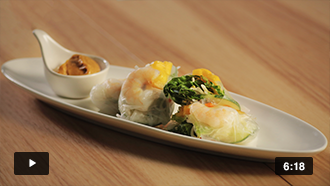
<style>
.page{position:relative;width:330px;height:186px}
.page>*{position:absolute;margin:0}
.t1{font:10.9px "Helvetica-Bold";color:#ffffff}
</style>
<div class="page">
<p class="t1" style="left:283px;top:162px;width:22px;height:9px">6:18</p>
</div>
